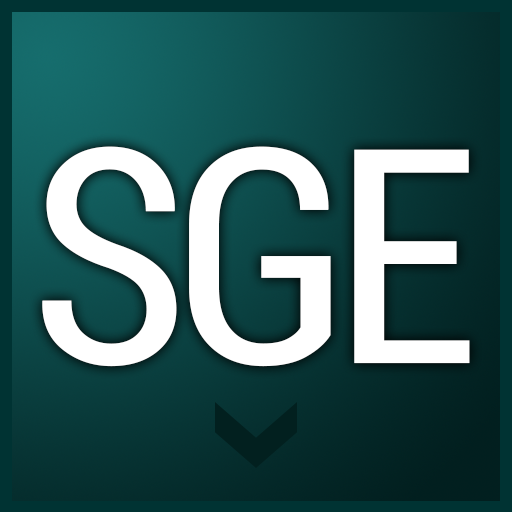
<style>
.page{position:relative;width:512px;height:512px}
.page>*{position:absolute;margin:0}
.t1{font:300px "Roboto-Condensed";letter-spacing:-0.05em;color:#ffffff}
</style>
<div class="page">
<p class="t1" style="left:42px;top:146px;width:428px;height:221px">SGE</p>
</div>
